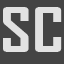
<style>
.page{position:relative;width:64px;height:64px;background:#444444}
.page>*{position:absolute;margin:0}
.t1{font:58.8px "AgencyFB-Bold";color:#e2e2e2;scale:1.18 1}
</style>
<div class="page">
<p class="t1" style="left:3px;top:7px;width:59px;height:45px">SC</p>
</div>
